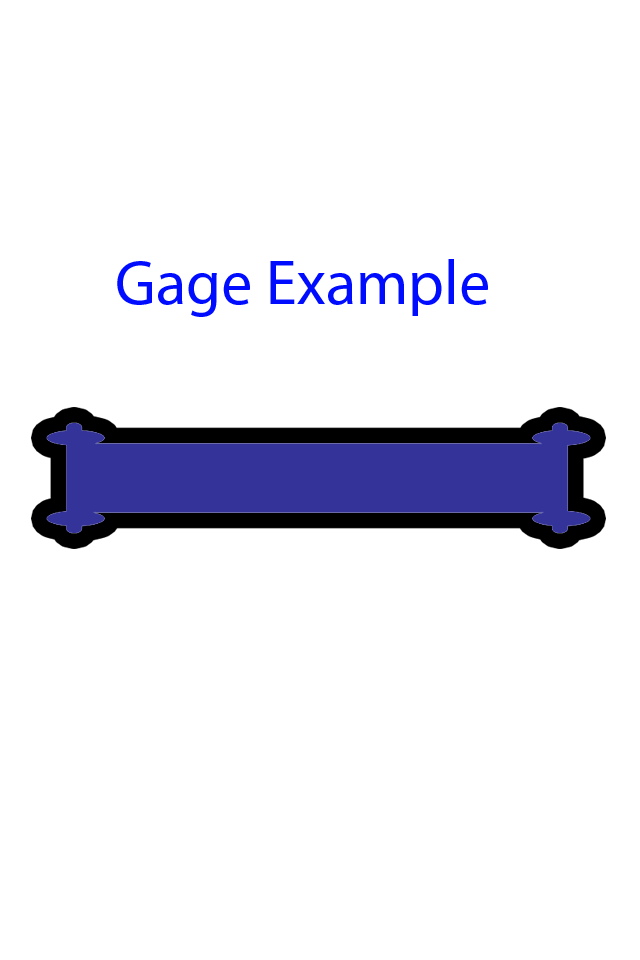
<style>
.page{position:relative;width:640px;height:960px;background:#ffffff}
.page>*{position:absolute;margin:0}
.t1{font:62.6px "MyriadPro-Regular";color:#000cff}
</style>
<div class="page">
<p class="t1" style="left:117px;top:259px;width:371px;height:58px">Gage Example</p>
</div>
